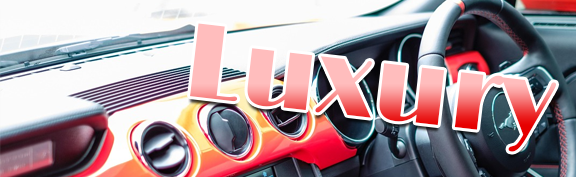
<style>
.page{position:relative;width:576px;height:177px}
.page>*{position:absolute;margin:0}
.t1{font:105.8px "Limelight-Regular"}
</style>
<div class="page">
<p class="t1" style="left:190px;top:23px;width:367px;height:129px;rotate:7deg">Luxury</p>
</div>
